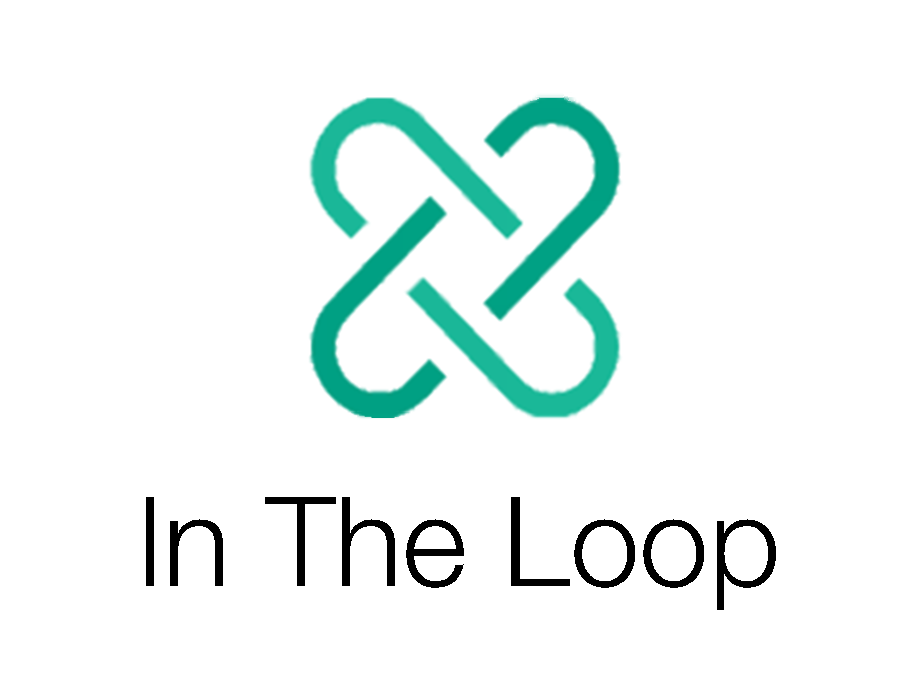
<style>
.page{position:relative;width:920px;height:680px;background:#ffffff}
.page>*{position:absolute;margin:0}
.t1{font:125.2px "HelveticaNeue-Light";color:#000000}
</style>
<div class="page">
<p class="t1" style="left:146px;top:497px;width:630px;height:113px">In The Loop</p>
</div>
